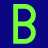
<style>
.page{position:relative;width:48px;height:48px;background:#0b0681}
.page>*{position:absolute;margin:0}
.t1{font:56.9px "EnvyCodeR";color:#75ff38}
</style>
<div class="page">
<p class="t1" style="left:13px;top:4px;width:23px;height:40px">B</p>
</div>
